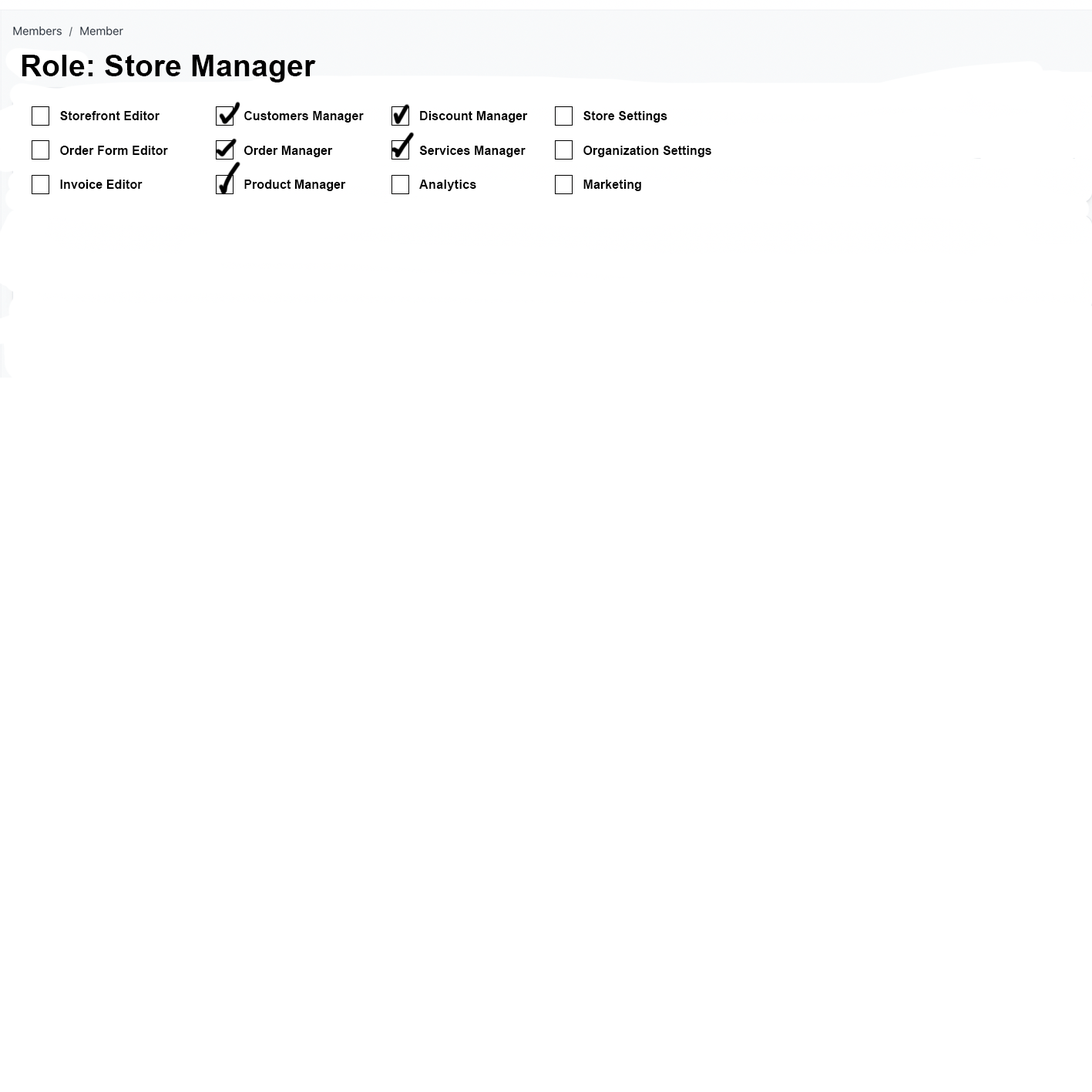
<style>
.page{position:relative;width:1092px;height:1092px;background:#ffffff}
.page>*{position:absolute;margin:0}
.t1{font:30.4px "Arial-BoldMT";color:#000000}
.t2{font:12.5px "Arial-BoldMT";color:#000000}
.t3{font:12.5px "Arial-BoldMT";letter-spacing:0.02em;color:#000000}
</style>
<div class="page">
<p class="t1" style="left:22px;top:55px;width:294px;height:27px">Role: Store Manager</p>
<p class="t2" style="left:60px;top:111px;width:100px;height:9px">Storefront Editor</p>
<p class="t2" style="left:244px;top:111px;width:120px;height:12px">Customers Manager</p>
<p class="t2" style="left:420px;top:111px;width:108px;height:12px">Discount Manager</p>
<p class="t2" style="left:583px;top:111px;width:84px;height:12px">Store Settings</p>
<p class="t2" style="left:60px;top:146px;width:108px;height:9px">Order Form Editor</p>
<p class="t2" style="left:244px;top:146px;width:89px;height:11px">Order Manager</p>
<p class="t2" style="left:419px;top:146px;width:107px;height:11px">Services Manager</p>
<p class="t2" style="left:583px;top:146px;width:128px;height:11px">Organization Settings</p>
<p class="t2" style="left:60px;top:180px;width:83px;height:9px">Invoice Editor</p>
<p class="t2" style="left:244px;top:180px;width:102px;height:11px">Product Manager</p>
<p class="t3" style="left:419px;top:180px;width:57px;height:11px">Analytics</p>
<p class="t2" style="left:583px;top:180px;width:58px;height:11px">Marketing</p>
</div>
